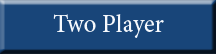
<style>
.page{position:relative;width:216px;height:54px;background:#184579}
.page>*{position:absolute;margin:0}
.t1{font:25px "MinionPro-Regular";color:#f6f9fd}
</style>
<div class="page">
<p class="t1" style="left:53px;top:14px;width:111px;height:24px">Two Player</p>
</div>
